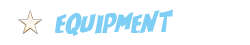
<style>
.page{position:relative;width:250px;height:45px;background:#ffffff}
.page>*{position:absolute;margin:0}
.t1{font:30px "HoustonComicsPersonalUse";color:#7ecef6}
</style>
<div class="page">
<p class="t1" style="left:55px;top:9px;width:118px;height:27px">EQUIPMENT</p>
</div>
